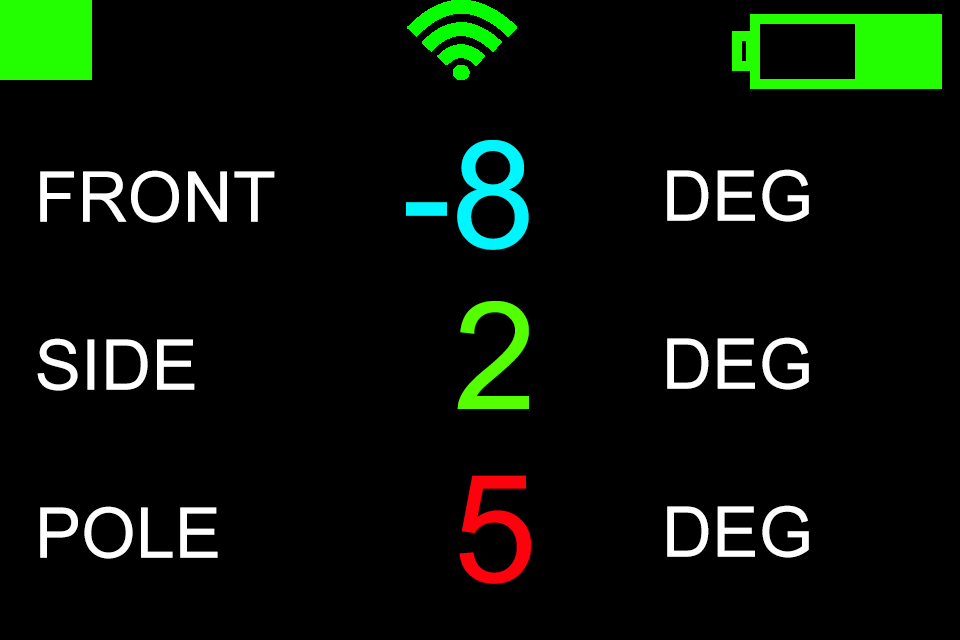
<style>
.page{position:relative;width:960px;height:640px;background:#000000}
.page>*{position:absolute;margin:0}
.t1{font:150px "ArialMT";color:#00f6ff}
.t2{font:70px "ArialMT";color:#fefefe}
.t3{font:150px "ArialMT";color:#54ff00}
.t4{font:150px "ArialMT";color:#ff010d}
</style>
<div class="page">
<p class="t1" style="left:406px;top:140px;width:123px;height:110px">-8</p>
<p class="t2" style="left:37px;top:170px;width:238px;height:389px">FRONT<br><br>SIDE<br><br>POLE</p>
<p class="t2" style="left:667px;top:169px;width:142px;height:389px">DEG<br><br>DEG<br><br>DEG</p>
<p class="t3" style="left:457px;top:301px;width:72px;height:108px">2</p>
<p class="t4" style="left:459px;top:475px;width:72px;height:109px">5</p>
</div>
